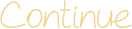
<style>
.page{position:relative;width:132px;height:29px;background:#ffffff}
.page>*{position:absolute;margin:0}
.t1{font:32px "AsCuteAs-Regular";color:#eed694}
</style>
<div class="page">
<p class="t1" style="left:0px;top:0px;width:132px;height:29px">Continue</p>
</div>
